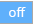
<style>
.page{position:relative;width:33px;height:25px;background:#5fb0fb}
.page>*{position:absolute;margin:0}
.t1{font:13px "OpenSans";letter-spacing:0.025em;color:#ffffff}
</style>
<div class="page">
<p class="t1" style="left:9px;top:7px;width:17px;height:10px">off</p>
</div>
